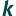
<style>
.page{position:relative;width:16px;height:16px;background:#ffffff}
.page>*{position:absolute;margin:0}
.t1{font:21px "MetaPro-BoldItalic";color:#03474b}
</style>
<div class="page">
<p class="t1" style="left:2px;top:0px;width:12px;height:16px">k</p>
</div>
